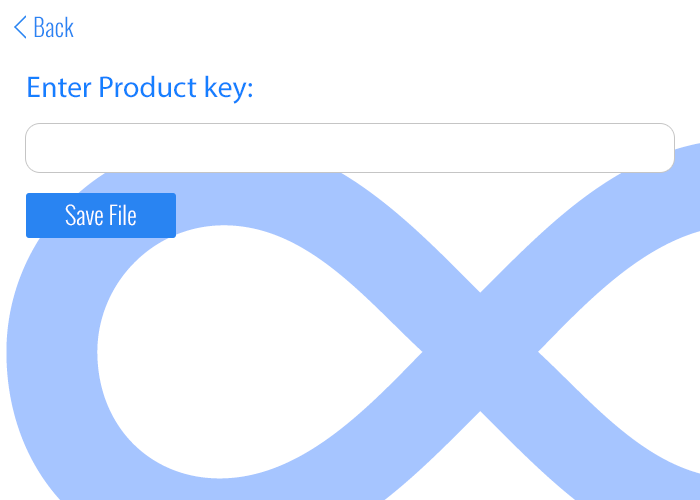
<style>
.page{position:relative;width:700px;height:500px;background:#ffffff}
.page>*{position:absolute;margin:0}
.t1{font:24px "Oswald-Light";color:#2984f2}
.t2{font:30px "MyriadPro-Regular";color:#157fff}
.t3{font:24px "Oswald-Light";color:#ffffff}
</style>
<div class="page">
<p class="t1" style="left:34px;top:16px;width:40px;height:22px">Back</p>
<p class="t2" style="left:28px;top:75px;width:224px;height:29px">Enter Product key:</p>
<p class="t3" style="left:65px;top:204px;width:71px;height:22px">Save File</p>
</div>
